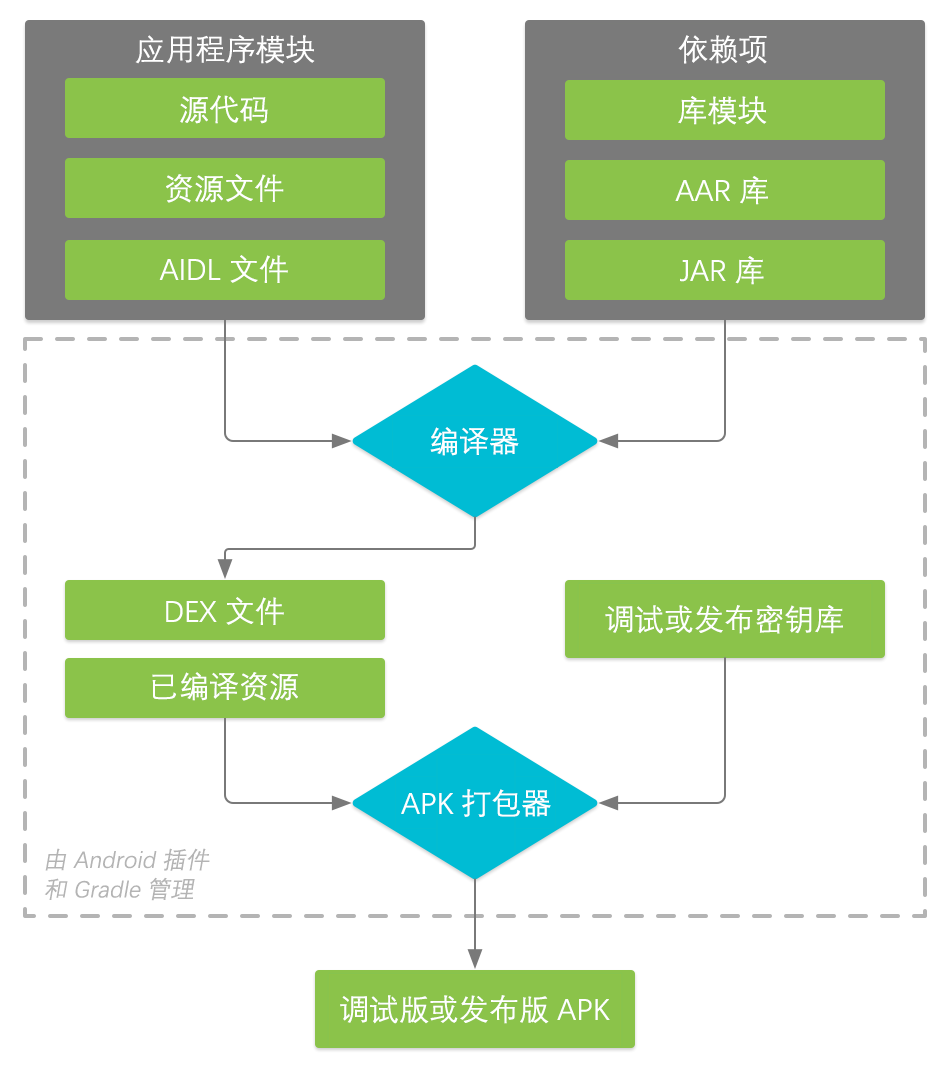
<style>
.page{position:relative;width:950px;height:1068px;background:#ffffff}
.page>*{position:absolute;margin:0}
.t1{font:30px "DengXian";color:#ffffff}
.t2{font:23.6px/29.6px "DengXian";color:#b4b4b4;font-style:italic}
</style>
<div class="page">
<p class="t1" style="left:135px;top:35px;width:180px;height:29px">应用程序模块</p>
<p class="t1" style="left:678px;top:35px;width:89px;height:29px">依赖项</p>
<p class="t1" style="left:180px;top:95px;width:88px;height:29px">源代码</p>
<p class="t1" style="left:678px;top:96px;width:89px;height:29px">库模块</p>
<p class="t1" style="left:166px;top:174px;width:118px;height:29px">资源文件</p>
<p class="t1" style="left:675px;top:176px;width:93px;height:29px">AAR 库</p>
<p class="t1" style="left:159px;top:255px;width:129px;height:28px">AIDL 文件</p>
<p class="t1" style="left:680px;top:256px;width:84px;height:29px">JAR 库</p>
<p class="t1" style="left:430px;top:427px;width:89px;height:29px">编译器</p>
<p class="t1" style="left:166px;top:597px;width:118px;height:28px">DEX 文件</p>
<p class="t1" style="left:605px;top:605px;width:238px;height:29px">调试或发布密钥库</p>
<p class="t1" style="left:152px;top:672px;width:146px;height:29px">已编译资源</p>
<p class="t1" style="left:401px;top:789px;width:150px;height:28px">APK 打包器</p>
<p class="t2" style="left:44px;top:848px;width:166px;height:53px">由 Android 插件<br>和 Gradle 管理</p>
<p class="t1" style="left:340px;top:995px;width:270px;height:29px">调试版或发布版 APK</p>
</div>
